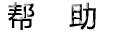
<style>
.page{position:relative;width:128px;height:32px;background:#ffffff}
.page>*{position:absolute;margin:0}
.t1{font:28.3px "MicrosoftYaHei";color:#000000}
</style>
<div class="page">
<p class="t1" style="left:8px;top:2px;width:88px;height:28px">帮    助</p>
</div>
